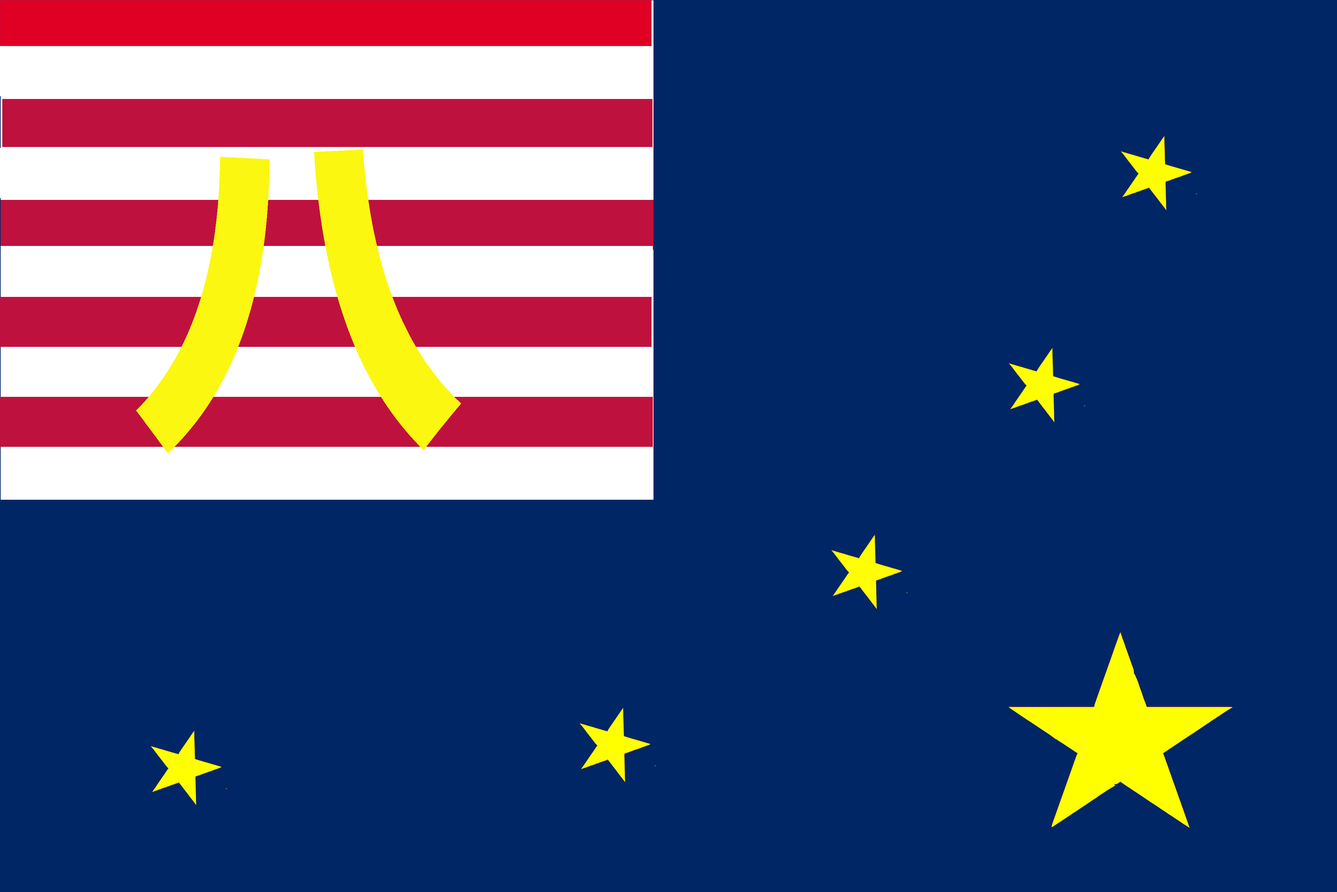
<style>
.page{position:relative;width:1337px;height:892px;background:#002666}
.page>*{position:absolute;margin:0}
.t1{font:326.5px "MicrosoftYaHei-Bold";color:#fbf711}
</style>
<div class="page">
<p class="t1" style="left:136px;top:150px;width:325px;height:303px">八</p>
</div>
